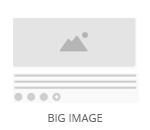
<style>
.page{position:relative;width:150px;height:130px;background:#ffffff}
.page>*{position:absolute;margin:0}
.t1{font:11px "OpenSans";color:#686868;text-transform:uppercase}
</style>
<div class="page">
<p class="t1" style="left:48px;top:114px;width:55px;height:8px">Big Image</p>
</div>
